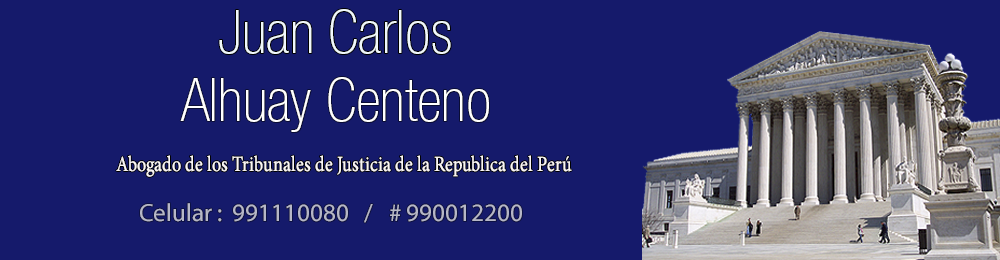
<style>
.page{position:relative;width:1000px;height:260px;background:#151a6b}
.page>*{position:absolute;margin:0}
.t1{font:59.9px "HelveticaNeueLTPro-ThCn";color:#f0f8fb}
.t2{font:59.9px "HelveticaNeueLTPro-ThCn";color:#ffffff}
.t3{font:21.6px "MinionPro-Regular";color:#f9f5f5;scale:0.83 1}
.t4{font:25px "MyriadPro-Regular";color:#b6b7c7}
</style>
<div class="page">
<p class="t1" style="left:219px;top:9px;width:232px;height:45px">Juan Carlos</p>
<p class="t2" style="left:180px;top:77px;width:309px;height:55px">Alhuay Centeno</p>
<p class="t3" style="left:116px;top:155px;width:456px;height:22px">Abogado de los Tribunales de Justicia de la Republica del Perú</p>
<p class="t4" style="left:140px;top:203px;width:233px;height:20px">Celular :  991110080   /</p>
<p class="t4" style="left:390px;top:204px;width:132px;height:18px"># 990012200</p>
</div>
